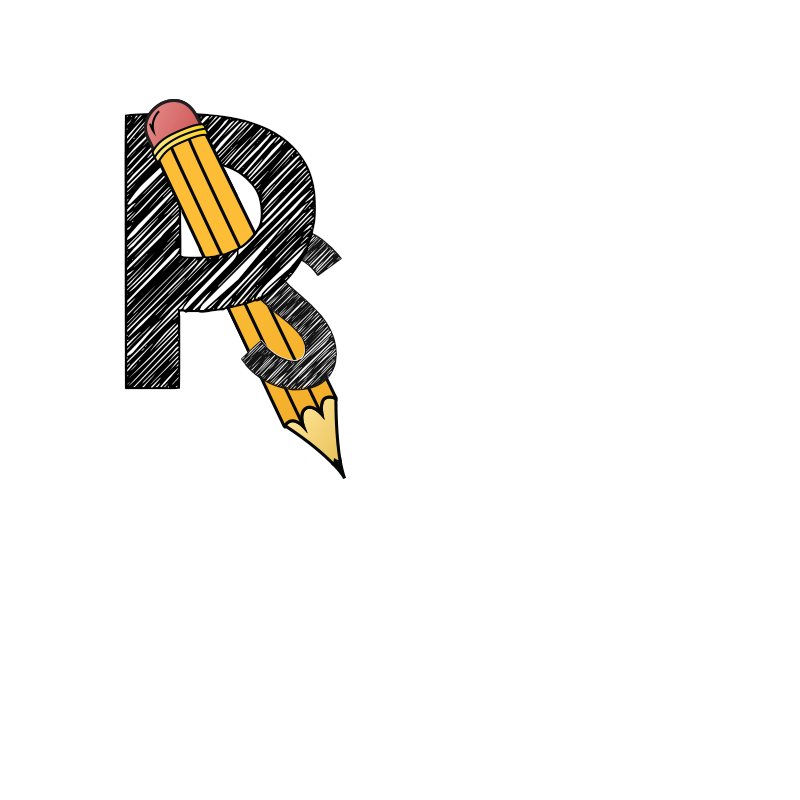
<style>
.page{position:relative;width:800px;height:800px;background:#ffffff}
.page>*{position:absolute;margin:0}
.t1{font:300px "KGBlankSpaceSketch";letter-spacing:0.05em;color:#000000}
.t2{font:300px "KGBlankSpaceSolid";letter-spacing:0.05em}
.t3{font:175px "KGBlankSpaceSketch";letter-spacing:0.05em;color:#151515}
.t4{font:175px "KGBlankSpaceSolid";letter-spacing:0.05em}
</style>
<div class="page">
<p class="t1" style="left:124px;top:112px;width:192px;height:278px">P</p>
<p class="t2" style="left:128px;top:117px;width:184px;height:267px">P</p>
<p class="t3" style="left:240px;top:227px;width:102px;height:164px;rotate:1deg">S</p>
<p class="t4" style="left:242px;top:230px;width:98px;height:158px;rotate:1deg">S</p>
</div>
